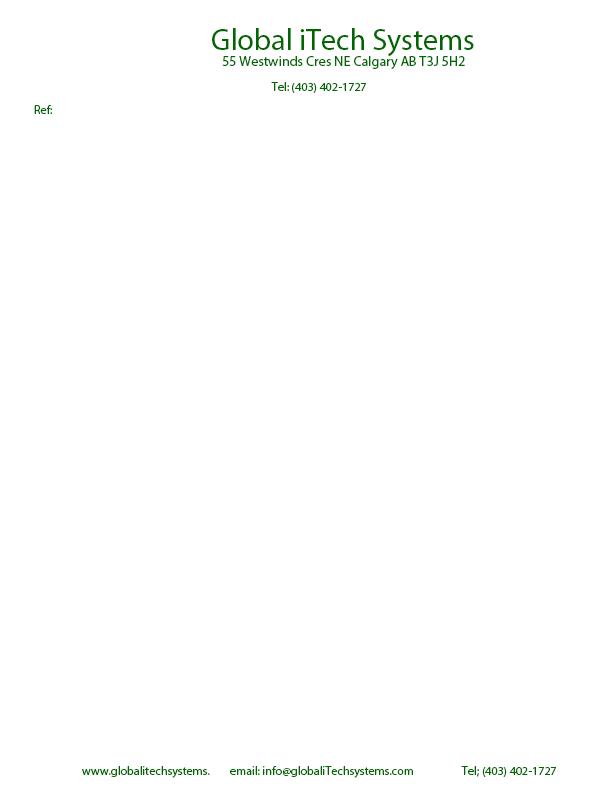
<style>
.page{position:relative;width:612px;height:792px;background:#ffffff}
.page>*{position:absolute;margin:0}
.t1{font:30px "MyriadPro-Regular";color:#006600}
.t2{font:14px "MyriadPro-Regular";color:#006600}
.t3{font:12px "MyriadPro-Regular";color:#006600}
</style>
<div class="page">
<p class="t1" style="left:212px;top:28px;width:262px;height:29px">Global iTech Systems</p>
<p class="t2" style="left:222px;top:56px;width:243px;height:13px">55 Westwinds Cres NE Calgary AB T3J 5H2</p>
<p class="t3" style="left:271px;top:82px;width:95px;height:11px">Tel: (403) 402-1727</p>
<p class="t3" style="left:34px;top:105px;width:18px;height:9px">Ref:</p>
<p class="t3" style="left:82px;top:766px;width:474px;height:12px">www.globalitechsystems.        email: info@globaliTechsystems.com                   Tel; (403) 402-1727</p>
</div>
